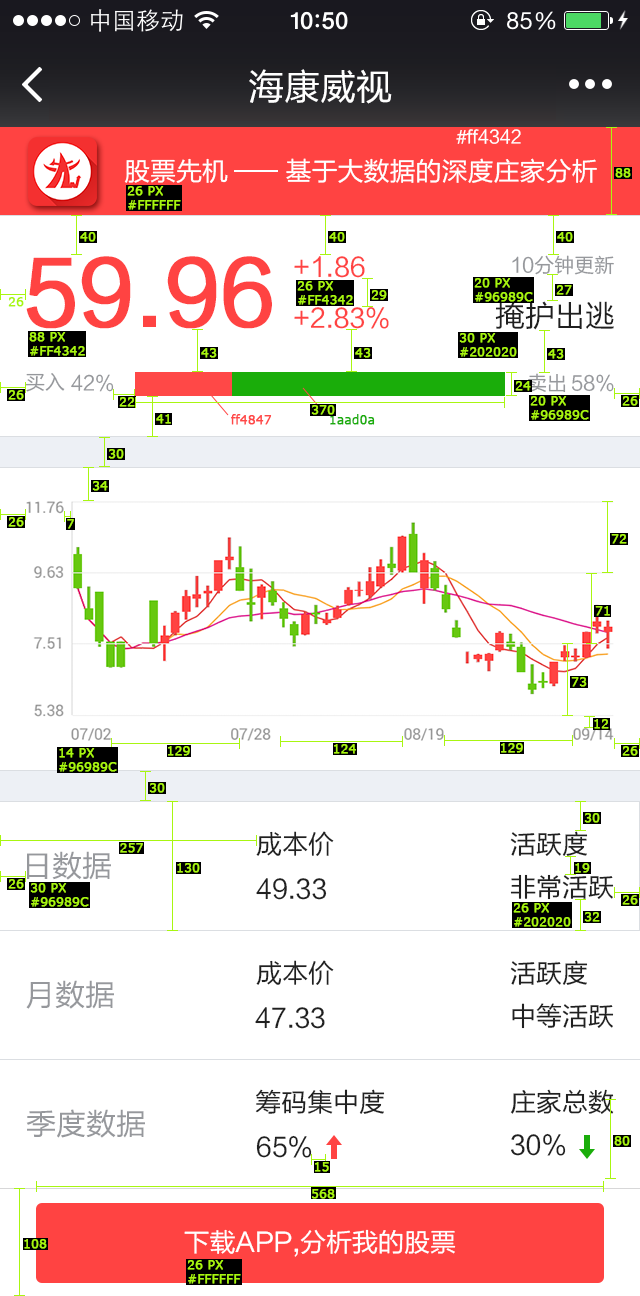
<style>
.page{position:relative;width:640px;height:1296px;background:#ffffff}
.page>*{position:absolute;margin:0}
.t1{font:36px "FZLTHJW--GB1-0";color:#ffffff}
.t2{font:18px "FZLTHJW--GB1-0";color:#ffffff}
.t3{font:26px "FZLTHJW--GB1-0";color:#ffffff}
.t4{font:12px "Verdana";color:#a8f611;font-weight:bold}
.t5{font:88px "FZLTHJW--GB1-0";color:#ff4342;font-weight:bold}
.t6{font:26px "FZLTHJW--GB1-0";color:#ff4342}
.t7{font:20px "FZLTHJW--GB1-0";color:#96989c}
.t8{font:30px "FZLTHJW--GB1-0";color:#353535}
.t9{font:12px "Verdana";color:#ff4847;font-weight:bold}
.t10{font:12px "Verdana";color:#1aad0a;font-weight:bold}
.t11{font:26px "FZLTHJW--GB1-0";color:#353535}
.t12{font:30px "FZLTHJW--GB1-0";color:#96989c}
</style>
<div class="page">
<p class="t1" style="left:249px;top:69px;width:143px;height:35px">海康威视</p>
<p class="t2" style="left:456px;top:129px;width:65px;height:15px">#ff4342</p>
<p class="t3" style="left:124px;top:158px;width:473px;height:25px">股票先机        基于大数据的深度庄家分析</p>
<p class="t4" style="left:615px;top:168px;width:16px;height:10px">88</p>
<p class="t4" style="left:127px;top:186px;width:54px;height:24px">26 PX<br>#FFFFFF</p>
<p class="t4" style="left:80px;top:232px;width:16px;height:10px">40</p>
<p class="t4" style="left:329px;top:232px;width:16px;height:10px">40</p>
<p class="t4" style="left:557px;top:232px;width:16px;height:10px">40</p>
<p class="t5" style="left:26px;top:256px;width:246px;height:73px">59.96</p>
<p class="t6" style="left:294px;top:256px;width:71px;height:22px">+1.86</p>
<p class="t7" style="left:512px;top:255px;width:102px;height:20px">10分钟更新</p>
<p class="t4" style="left:297px;top:281px;width:56px;height:24px">26 PX<br>#FF4342</p>
<p class="t4" style="left:474px;top:278px;width:59px;height:24px">20 PX<br>#96989C</p>
<p class="t4" style="left:371px;top:290px;width:16px;height:10px">29</p>
<p class="t4" style="left:556px;top:285px;width:16px;height:10px">27</p>
<p class="t4" style="left:8px;top:297px;width:16px;height:10px">26</p>
<p class="t8" style="left:495px;top:301px;width:119px;height:29px">掩护出逃</p>
<p class="t6" style="left:294px;top:307px;width:95px;height:22px">+2.83%</p>
<p class="t4" style="left:29px;top:332px;width:56px;height:24px">88 PX<br>#FF4342</p>
<p class="t4" style="left:459px;top:333px;width:58px;height:24px">30 PX<br>#202020</p>
<p class="t4" style="left:201px;top:348px;width:16px;height:10px">43</p>
<p class="t4" style="left:355px;top:348px;width:16px;height:10px">43</p>
<p class="t4" style="left:548px;top:349px;width:16px;height:10px">43</p>
<p class="t7" style="left:25px;top:373px;width:40px;height:19px">买入</p>
<p class="t7" style="left:71px;top:374px;width:43px;height:18px">42%</p>
<p class="t7" style="left:527px;top:373px;width:39px;height:20px">卖出</p>
<p class="t7" style="left:572px;top:374px;width:42px;height:18px">58%</p>
<p class="t4" style="left:8px;top:390px;width:16px;height:10px">26</p>
<p class="t4" style="left:515px;top:381px;width:16px;height:10px">24</p>
<p class="t4" style="left:119px;top:397px;width:16px;height:10px">22</p>
<p class="t4" style="left:530px;top:396px;width:59px;height:24px">20 PX<br>#96989C</p>
<p class="t4" style="left:622px;top:396px;width:16px;height:10px">26</p>
<p class="t4" style="left:156px;top:414px;width:15px;height:10px">41</p>
<p class="t9" style="left:231px;top:414px;width:41px;height:11px">ff4847</p>
<p class="t4" style="left:311px;top:405px;width:24px;height:10px">370</p>
<p class="t10" style="left:330px;top:414px;width:45px;height:11px">1aad0a</p>
<p class="t4" style="left:108px;top:449px;width:16px;height:10px">30</p>
<p class="t4" style="left:92px;top:481px;width:16px;height:10px">34</p>
<p class="t4" style="left:8px;top:517px;width:16px;height:10px">26</p>
<p class="t4" style="left:67px;top:519px;width:7px;height:10px">7</p>
<p class="t4" style="left:611px;top:534px;width:16px;height:10px">72</p>
<p class="t4" style="left:595px;top:606px;width:15px;height:10px">71</p>
<p class="t4" style="left:571px;top:677px;width:16px;height:10px">73</p>
<p class="t4" style="left:594px;top:719px;width:15px;height:10px">12</p>
<p class="t4" style="left:59px;top:748px;width:58px;height:24px">14 PX<br>#96989C</p>
<p class="t4" style="left:168px;top:746px;width:22px;height:10px">129</p>
<p class="t4" style="left:334px;top:744px;width:22px;height:10px">124</p>
<p class="t4" style="left:501px;top:743px;width:22px;height:10px">129</p>
<p class="t4" style="left:622px;top:746px;width:16px;height:10px">26</p>
<p class="t4" style="left:149px;top:783px;width:16px;height:10px">30</p>
<p class="t4" style="left:584px;top:813px;width:16px;height:10px">30</p>
<p class="t11" style="left:256px;top:831px;width:78px;height:25px">成本价</p>
<p class="t11" style="left:510px;top:831px;width:78px;height:25px">活跃度</p>
<p class="t4" style="left:120px;top:843px;width:23px;height:10px">257</p>
<p class="t12" style="left:27px;top:851px;width:84px;height:29px">日数据</p>
<p class="t4" style="left:177px;top:863px;width:23px;height:10px">130</p>
<p class="t4" style="left:575px;top:863px;width:15px;height:10px">19</p>
<p class="t4" style="left:8px;top:879px;width:16px;height:10px">26</p>
<p class="t11" style="left:256px;top:878px;width:71px;height:22px">49.33</p>
<p class="t11" style="left:510px;top:874px;width:104px;height:26px">非常活跃</p>
<p class="t4" style="left:30px;top:883px;width:59px;height:24px">30 PX<br>#96989C</p>
<p class="t4" style="left:513px;top:903px;width:58px;height:24px">26 PX<br>#202020</p>
<p class="t4" style="left:622px;top:895px;width:16px;height:10px">26</p>
<p class="t4" style="left:584px;top:912px;width:16px;height:10px">32</p>
<p class="t11" style="left:256px;top:960px;width:78px;height:25px">成本价</p>
<p class="t11" style="left:510px;top:960px;width:78px;height:25px">活跃度</p>
<p class="t12" style="left:26px;top:980px;width:88px;height:29px">月数据</p>
<p class="t11" style="left:255px;top:1007px;width:70px;height:22px">47.33</p>
<p class="t11" style="left:512px;top:1003px;width:102px;height:26px">中等活跃</p>
<p class="t11" style="left:255px;top:1089px;width:130px;height:26px">筹码集中度</p>
<p class="t11" style="left:510px;top:1089px;width:104px;height:25px">庄家总数</p>
<p class="t12" style="left:26px;top:1109px;width:119px;height:29px">季度数据</p>
<p class="t11" style="left:511px;top:1133px;width:55px;height:23px">30%</p>
<p class="t11" style="left:256px;top:1135px;width:56px;height:23px">65%</p>
<p class="t4" style="left:614px;top:1136px;width:16px;height:10px">80</p>
<p class="t4" style="left:315px;top:1162px;width:14px;height:10px">15</p>
<p class="t4" style="left:312px;top:1189px;width:23px;height:10px">568</p>
<p class="t3" style="left:184px;top:1229px;width:272px;height:28px">下载APP,分析我的股票</p>
<p class="t4" style="left:24px;top:1239px;width:23px;height:10px">108</p>
<p class="t4" style="left:187px;top:1260px;width:54px;height:24px">26 PX<br>#FFFFFF</p>
</div>
